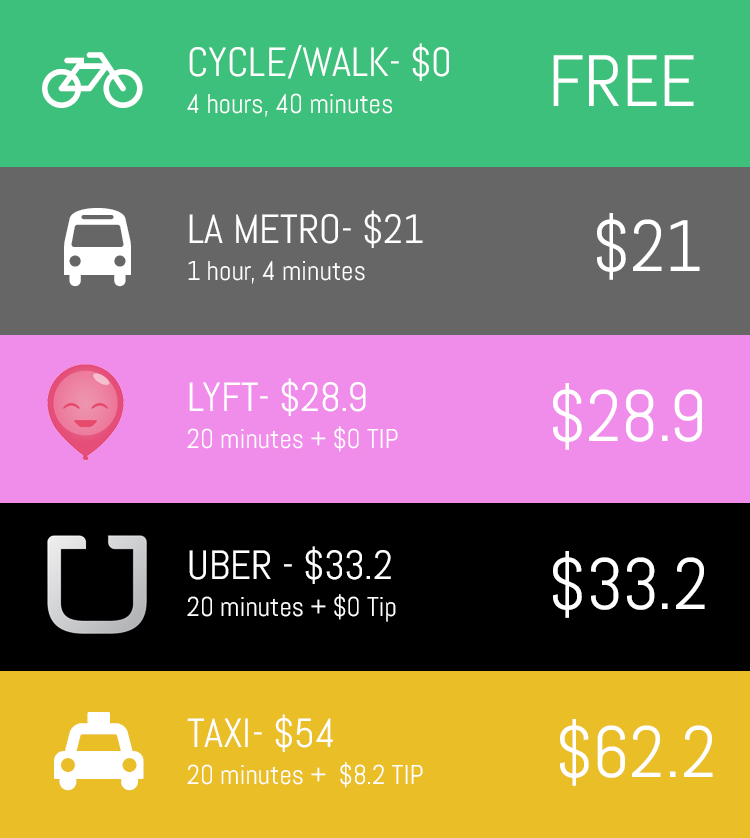
<style>
.page{position:relative;width:750px;height:838px}
.page>*{position:absolute;margin:0}
.t1{font:40.8px "Abel-Regular";color:#ffffff}
.t2{font:72.4px "Abel-Regular";color:#ffffff}
.t3{font:27.2px "Abel-Regular";color:#ffffff}
</style>
<div class="page">
<p class="t1" style="left:189px;top:43px;width:260px;height:38px">CYCLE/WALK- $0</p>
<p class="t2" style="left:553px;top:55px;width:141px;height:51px">FREE</p>
<p class="t3" style="left:187px;top:93px;width:205px;height:24px">4 hours, 40 minutes</p>
<p class="t1" style="left:189px;top:210px;width:234px;height:38px">LA METRO- $21</p>
<p class="t2" style="left:597px;top:213px;width:103px;height:67px">$21</p>
<p class="t3" style="left:188px;top:261px;width:177px;height:23px">1 hour, 4 minutes</p>
<p class="t1" style="left:189px;top:378px;width:177px;height:38px">LYFT- $28.9</p>
<p class="t2" style="left:553px;top:383px;width:149px;height:67px">$28.9</p>
<p class="t3" style="left:187px;top:426px;width:211px;height:26px">20 minutes + $0 TIP</p>
<p class="t1" style="left:189px;top:546px;width:202px;height:38px">UBER - $33.2</p>
<p class="t2" style="left:553px;top:551px;width:152px;height:67px">$33.2</p>
<p class="t3" style="left:187px;top:594px;width:209px;height:28px">20 minutes + $0 Tip</p>
<p class="t1" style="left:187px;top:714px;width:146px;height:38px">TAXI- $54</p>
<p class="t2" style="left:560px;top:719px;width:153px;height:67px">$62.2</p>
<p class="t3" style="left:187px;top:762px;width:236px;height:26px">20 minutes +  $8.2 TIP</p>
</div>
